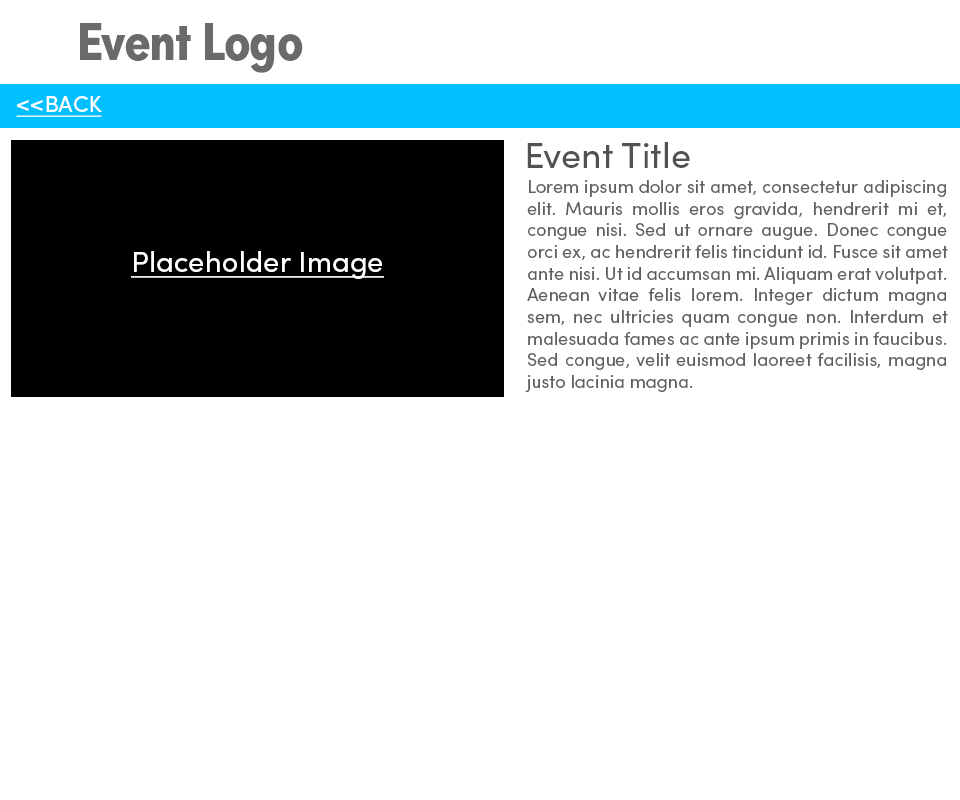
<style>
.page{position:relative;width:960px;height:800px;background:#ffffff}
.page>*{position:absolute;margin:0}
.t1{font:54.2px "SofiaProBoldCondensed";letter-spacing:-0.02em;color:#6a6a6a}
.t2{font:22.6px "SofiaProRegular";color:#ffffff;text-decoration:underline}
.t3{font:36.1px "SofiaProRegular";color:#535252}
.t4{font:18.1px "SofiaProRegular";color:#606060}
.t5{font:29.1px "SofiaProRegular";color:#ffffff;text-decoration:underline}
</style>
<div class="page">
<p class="t1" style="left:80px;top:23px;width:223px;height:50px">Event Logo</p>
<p class="t2" style="left:16px;top:96px;width:86px;height:21px">&lt;&lt;BACK</p>
<p class="t3" style="left:527px;top:142px;width:163px;height:26px">Event Title</p>
<p class="t4" style="left:525px;top:180px;width:423px;height:212px;text-align:justify">Lorem ipsum dolor sit amet, consectetur adipiscing elit. Mauris mollis eros gravida, hendrerit mi et, congue nisi. Sed ut ornare augue. Donec congue orci ex, ac hendrerit felis tincidunt id. Fusce sit amet ante nisi. Ut id accumsan mi. Aliquam erat volutpat. Aenean vitae felis lorem. Integer dictum magna sem, nec ultricies quam congue non. Interdum et malesuada fames ac ante ipsum primis in faucibus. Sed congue, velit euismod laoreet facilisis, magna justo lacinia magna.</p>
<p class="t5" style="left:131px;top:251px;width:253px;height:28px">Placeholder Image</p>
</div>
